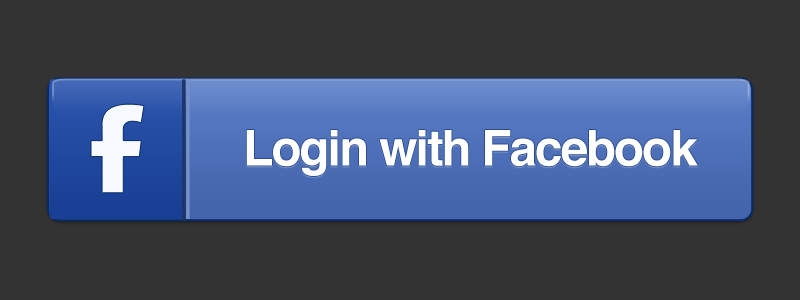
<style>
.page{position:relative;width:800px;height:300px;background:#333333}
.page>*{position:absolute;margin:0}
.t1{font:49.2px "Helvetica-Bold";letter-spacing:-0.04em;color:#ffffff}
</style>
<div class="page">
<p class="t1" style="left:246px;top:130px;width:452px;height:46px">Login with Facebook</p>
</div>
